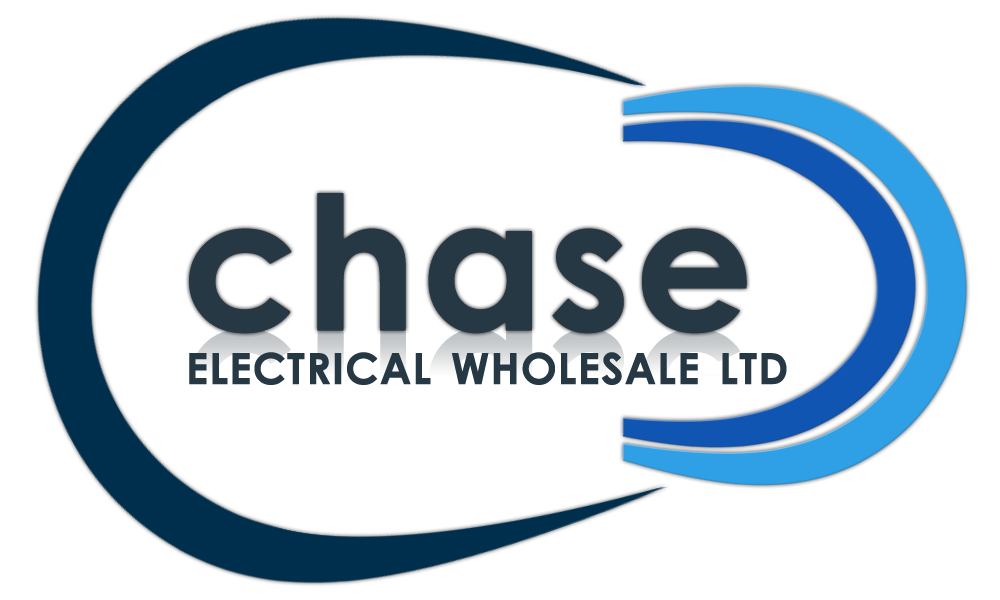
<style>
.page{position:relative;width:1000px;height:600px;background:#ffffff}
.page>*{position:absolute;margin:0}
.t1{font:185px "CenturyGothic-Bold";color:#253844;font-weight:bold}
.t2{font:61px "CenturyGothic-Bold";color:#253844;font-variant:small-caps;font-weight:bold}
</style>
<div class="page">
<p class="t1" style="left:189px;top:193px;width:558px;height:141px">chase</p>
<p class="t2" style="left:189px;top:352px;width:598px;height:33px">electrical wholesale ltd</p>
</div>
